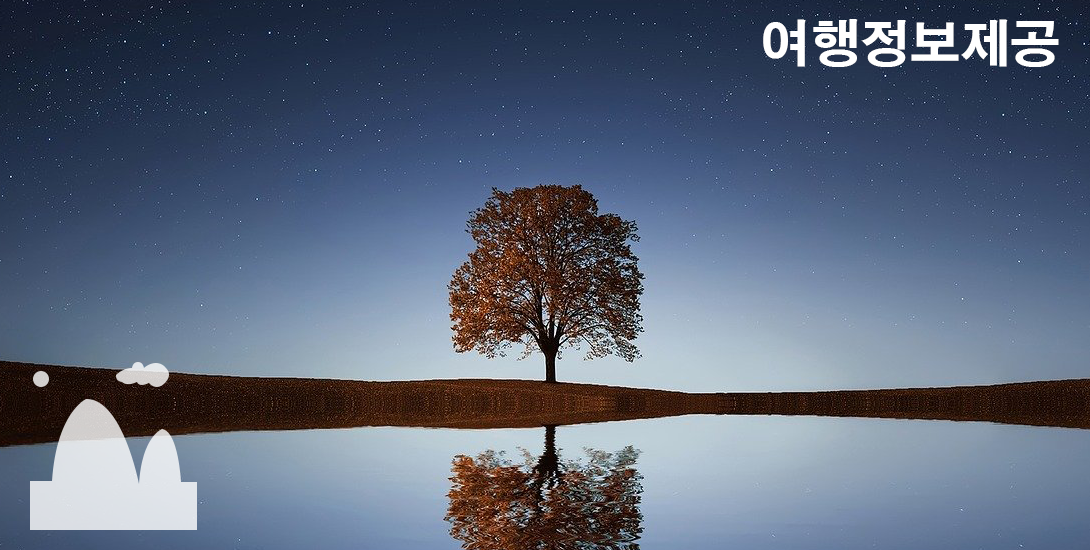
<style>
.page{position:relative;width:1090px;height:550px}
.page>*{position:absolute;margin:0}
.t1{font:50px "H2gtrE";color:#ffffff}
</style>
<div class="page">
<p class="t1" style="left:763px;top:19px;width:296px;height:48px">여행정보제공</p>
</div>
